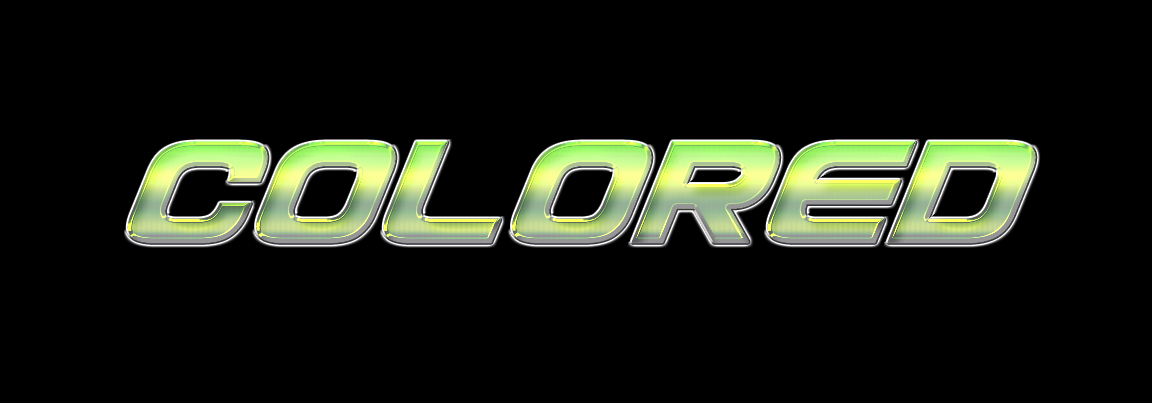
<style>
.page{position:relative;width:1152px;height:403px;background:#000000}
.page>*{position:absolute;margin:0}
.t1{font:172px "UsuziItalic";letter-spacing:-0.025em;font-weight:bold}
</style>
<div class="page">
<p class="t1" style="left:127px;top:141px;width:909px;height:102px">Colored</p>
<p class="t1" style="left:127px;top:141px;width:909px;height:102px">Colored</p>
<p class="t1" style="left:127px;top:141px;width:909px;height:102px">Colored</p>
</div>
